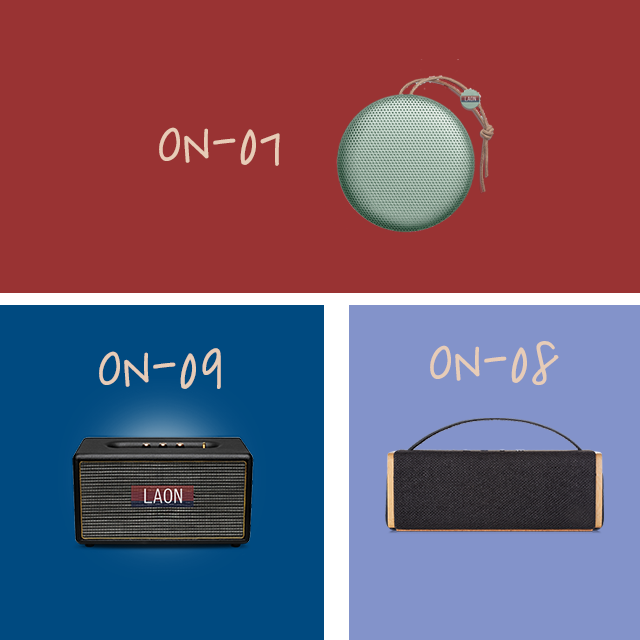
<style>
.page{position:relative;width:640px;height:640px;background:#993333}
.page>*{position:absolute;margin:0}
.t1{font:70px "SDBaikzongyulPen-bMd";color:#e7ccb7}
</style>
<div class="page">
<p class="t1" style="left:159px;top:127px;width:121px;height:39px">ON-07</p>
<p class="t1" style="left:430px;top:341px;width:129px;height:45px">ON-08</p>
<p class="t1" style="left:99px;top:348px;width:122px;height:41px">ON-09</p>
</div>
